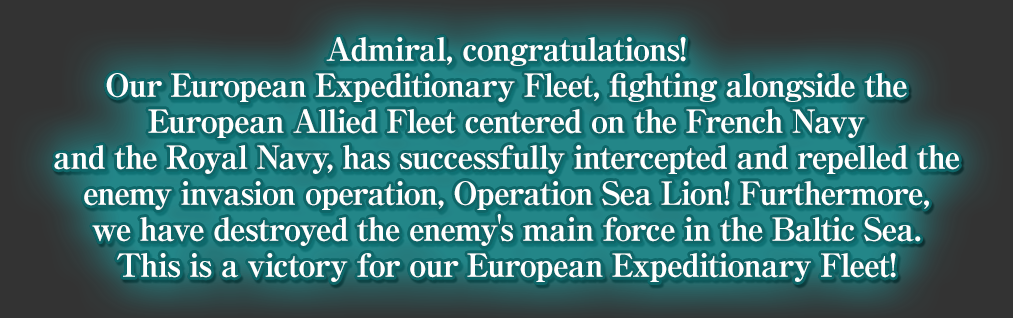
<style>
.page{position:relative;width:1013px;height:318px}
.page>*{position:absolute;margin:0}
.t1{font:32px/36px "RyuminPro-ExBold";letter-spacing:-0.04em;color:#ffffff}
</style>
<div class="page">
<p class="t1" style="left:54px;top:37px;width:905px;height:245px;text-align:center">Admiral, congratulations!<br>Our European Expeditionary Fleet, fighting alongside the<br>European Allied Fleet centered on the French Navy<br>and the Royal Navy, has successfully intercepted and repelled the<br>enemy invasion operation, Operation Sea Lion! Furthermore,<br>we have destroyed the enemy's main force in the Baltic Sea.<br>This is a victory for our European Expeditionary Fleet!</p>
</div>
